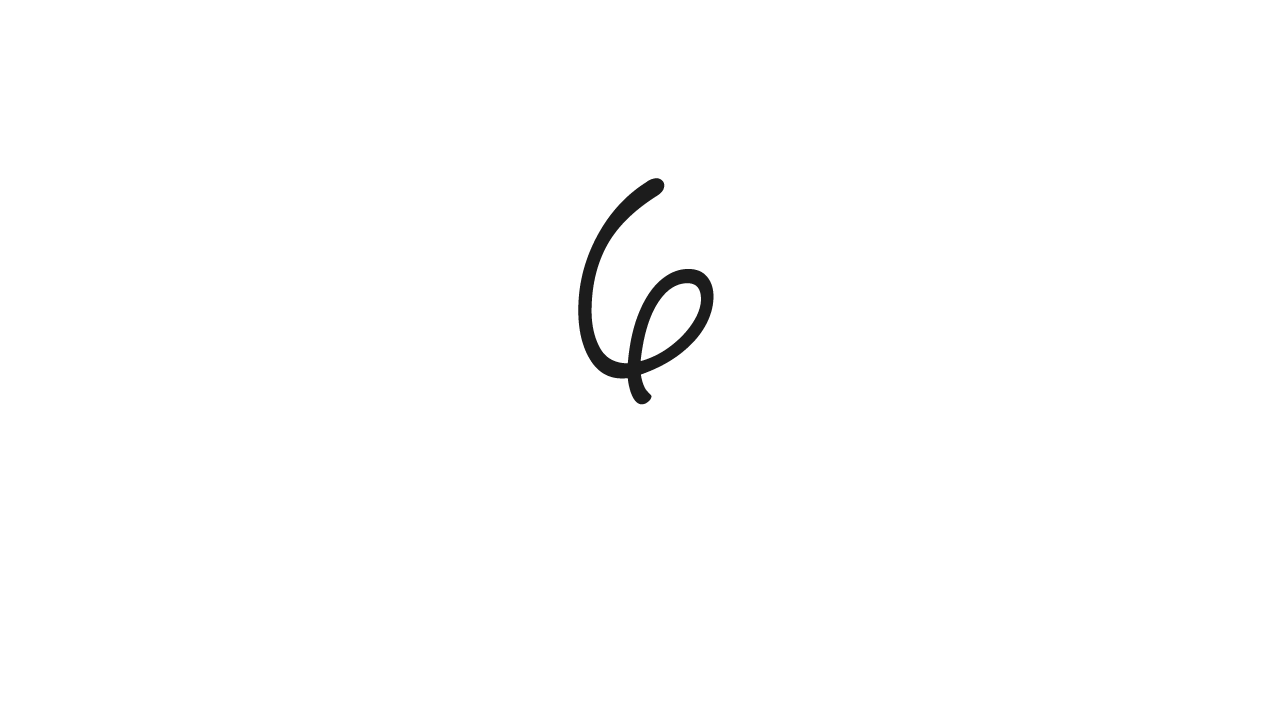
<style>
.page{position:relative;width:1280px;height:720px;background:#ffffff}
.page>*{position:absolute;margin:0}
.t1{font:297.5px "InkFree";color:#1c1c1c;scale:0.91 1}
</style>
<div class="page">
<p class="t1" style="left:578px;top:178px;width:136px;height:227px">6</p>
</div>
